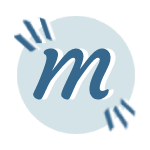
<style>
.page{position:relative;width:150px;height:150px;background:#ffffff}
.page>*{position:absolute;margin:0}
.t1{font:100px "Courgette-Regular";color:#36678c}
</style>
<div class="page">
<p class="t1" style="left:33px;top:48px;width:78px;height:52px">m</p>
</div>
